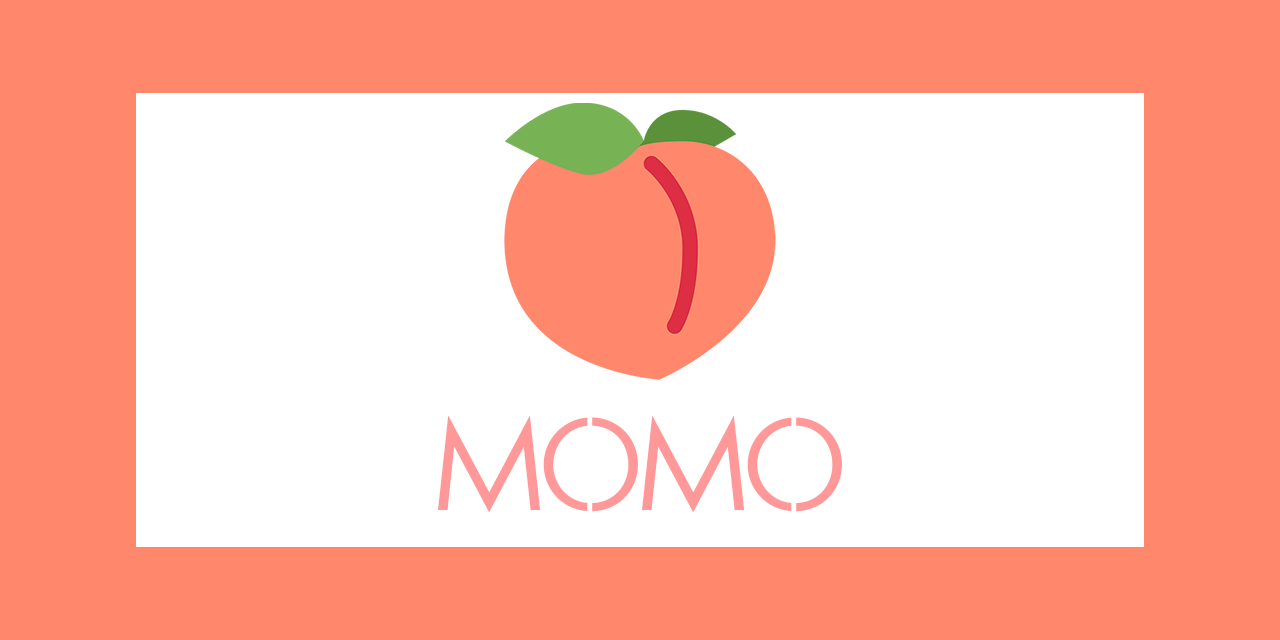
<style>
.page{position:relative;width:1280px;height:640px;background:#ff886c}
.page>*{position:absolute;margin:0}
.t1{font:125px "Pasajero";color:#ff9999}
</style>
<div class="page">
<p class="t1" style="left:438px;top:415px;width:404px;height:98px">MOMO</p>
</div>
